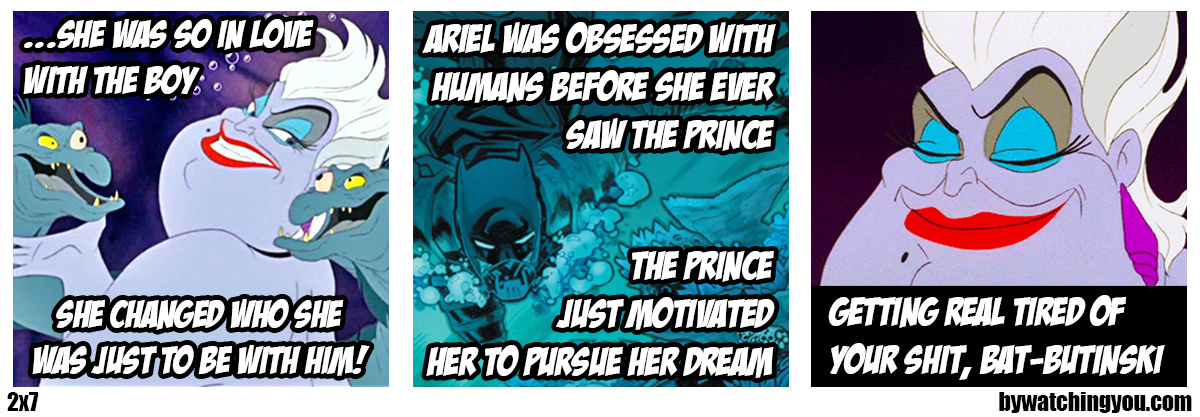
<style>
.page{position:relative;width:1200px;height:417px;background:#ffffff}
.page>*{position:absolute;margin:0}
.t1{font:38.4px "BadaBoomBB";color:#ffffff}
.t2{font:40.2px "BadaBoomBB";color:#ffffff}
.t3{font:23.7px "Impact";color:#000000}
</style>
<div class="page">
<p class="t1" style="left:23px;top:19px;width:291px;height:75px">...SHE WAS SO IN LOVE<br>WITH the BOY</p>
<p class="t2" style="left:422px;top:22px;width:354px;height:129px;text-align:right">ariel was obsessed with<br>humans before she ever<br>saw the prince</p>
<p class="t2" style="left:426px;top:251px;width:349px;height:127px;text-align:right">the prince<br>just motivated<br>her to pursue her dream</p>
<p class="t1" style="left:32px;top:299px;width:338px;height:77px;text-align:center">SHE CHANGED WHO she<br>WAS just TO BE WITH HIM!</p>
<p class="t2" style="left:828px;top:295px;width:337px;height:85px">getting real tired of<br>your shit, bat-butinski</p>
<p class="t3" style="left:7px;top:392px;width:32px;height:19px">2x7</p>
<p class="t3" style="left:999px;top:392px;width:193px;height:21px">bywatchingyou.com</p>
</div>
